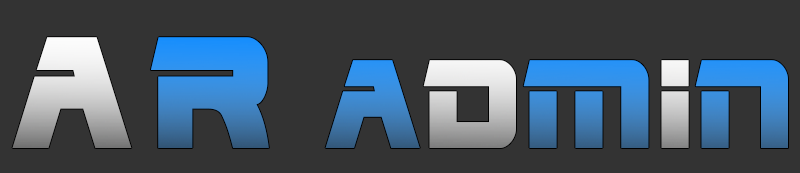
<style>
.page{position:relative;width:800px;height:173px;background:#333333}
.page>*{position:absolute;margin:0}
.t1{font:187.8px "EdgeRacer";letter-spacing:0.078em;text-transform:uppercase}
.t2{font:149px "EdgeRacer";text-transform:uppercase}
</style>
<div class="page">
<p class="t1" style="left:12px;top:37px;width:776px;height:111px">AR <span class="t2">A</span><span class="t2">D</span><span class="t2">M</span><span class="t2">I</span><span class="t2">N</span></p>
</div>
